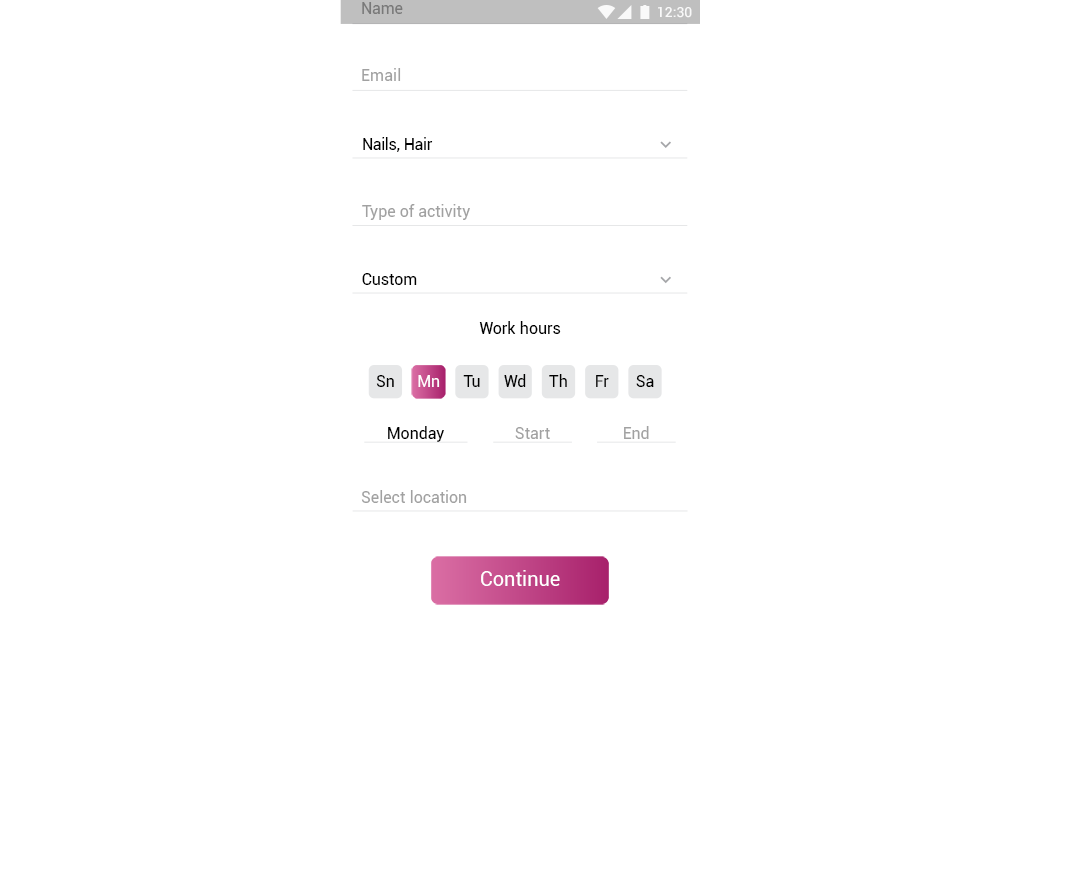
<style>
.page{position:relative;width:1080px;height:896px;background:#ffffff}
.page>*{position:absolute;margin:0}
.t1{font:16px "Roboto-Regular";letter-spacing:0.01em;color:#797979}
.t2{font:14px "Roboto-Medium";color:#ffffff}
.t3{font:16px "Roboto-Regular";letter-spacing:0.01em;color:#a1a1a1}
.t4{font:16px "Roboto-Regular";letter-spacing:-0.005em;color:#000000}
.t5{font:16px "Roboto-Regular";letter-spacing:0.01em;color:#000000}
.t6{font:16px "Roboto-Regular";letter-spacing:0.01em;color:#ffffff}
.t7{font:20px "Roboto-Regular";color:#ffffff}
</style>
<div class="page">
<p class="t1" style="left:362px;top:2px;width:41px;height:12px">Name</p>
<p class="t2" style="left:658px;top:7px;width:34px;height:11px">12:30</p>
<p class="t3" style="left:362px;top:68px;width:39px;height:13px">Email</p>
<p class="t4" style="left:363px;top:137px;width:70px;height:15px">Nails, Hair</p>
<p class="t3" style="left:362px;top:204px;width:108px;height:16px">Type of activity</p>
<p class="t5" style="left:362px;top:273px;width:55px;height:12px">Custom</p>
<p class="t5" style="left:479px;top:321px;width:82px;height:13px">Work hours</p>
<p class="t5" style="left:376px;top:375px;width:18px;height:12px">Sn</p>
<p class="t6" style="left:418px;top:375px;width:22px;height:12px">Mn</p>
<p class="t5" style="left:463px;top:375px;width:17px;height:12px">Tu</p>
<p class="t5" style="left:504px;top:374px;width:22px;height:13px">Wd</p>
<p class="t5" style="left:549px;top:374px;width:18px;height:13px">Th</p>
<p class="t5" style="left:596px;top:375px;width:13px;height:12px">Fr</p>
<p class="t5" style="left:636px;top:375px;width:18px;height:12px">Sa</p>
<p class="t5" style="left:388px;top:426px;width:56px;height:16px">Monday</p>
<p class="t3" style="left:515px;top:427px;width:35px;height:12px">Start</p>
<p class="t3" style="left:624px;top:426px;width:25px;height:13px">End</p>
<p class="t3" style="left:361px;top:490px;width:106px;height:13px">Select location</p>
<p class="t7" style="left:481px;top:570px;width:79px;height:16px">Continue</p>
</div>
